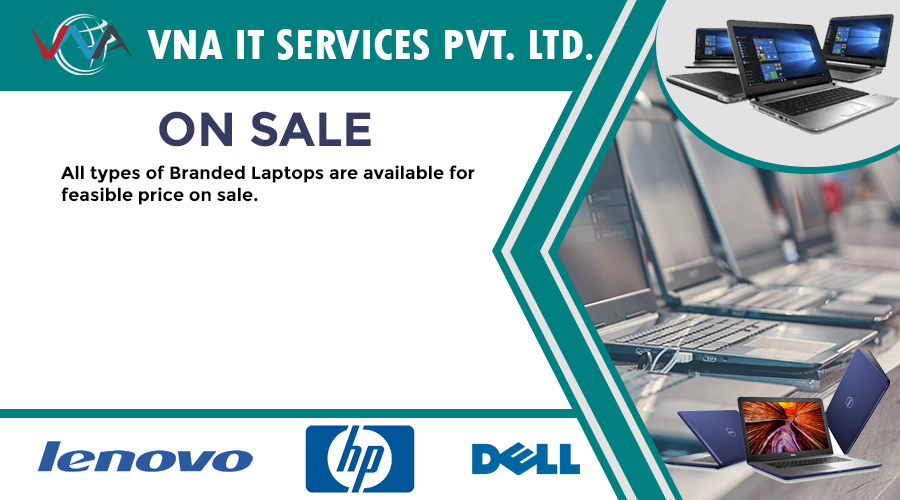
<style>
.page{position:relative;width:900px;height:500px;background:#ffffff}
.page>*{position:absolute;margin:0}
.t1{font:44.6px "TwCenMT-CondensedExtraBold";color:#ffffff}
.t2{font:59.5px "AdobeDevanagari-Regular";color:#ffffff}
.t3{font:48px "Montserrat-Bold";color:#373b62}
.t4{font:18px "Montserrat-Bold";color:#000000}
</style>
<div class="page">
<p class="t1" style="left:147px;top:29px;width:446px;height:31px">VNA IT SERVICES PVT. LTD<span class="t2">.</span></p>
<p class="t3" style="left:159px;top:111px;width:212px;height:36px">ON SALE</p>
<p class="t4" style="left:61px;top:165px;width:414px;height:40px">All types of Branded Laptops are available for <br>feasible price on sale.</p>
</div>
